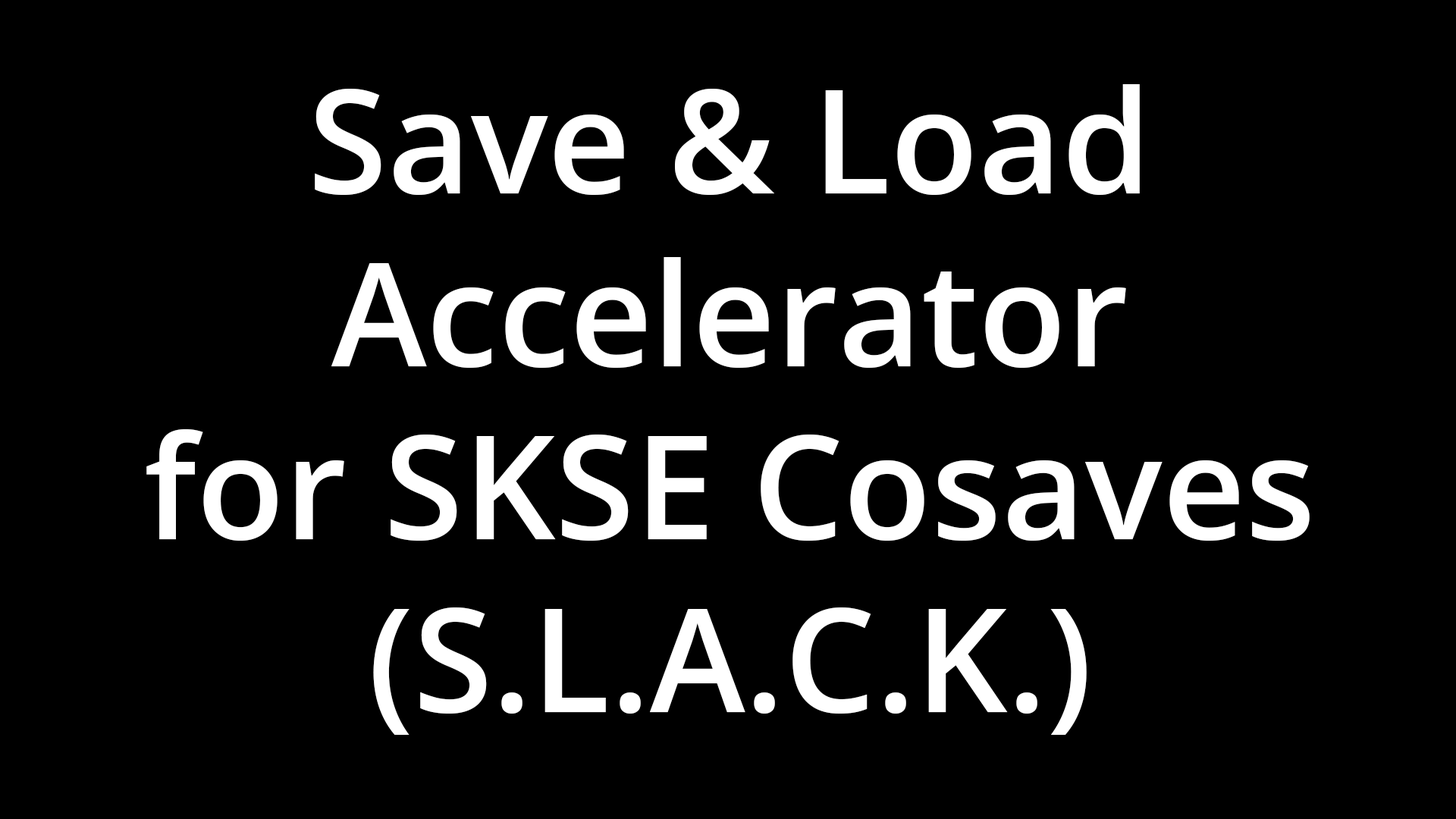
<style>
.page{position:relative;width:1456px;height:819px;background:#000000}
.page>*{position:absolute;margin:0}
.t1{font:144.1px "OpenSans-SemiBold";color:#ffffff}
</style>
<div class="page">
<p class="t1" style="left:146px;top:84px;width:1164px;height:651px;text-align:center">Save &amp; Load<br>Accelerator<br>for SKSE Cosaves<br>(S.L.A.C.K.)</p>
</div>
